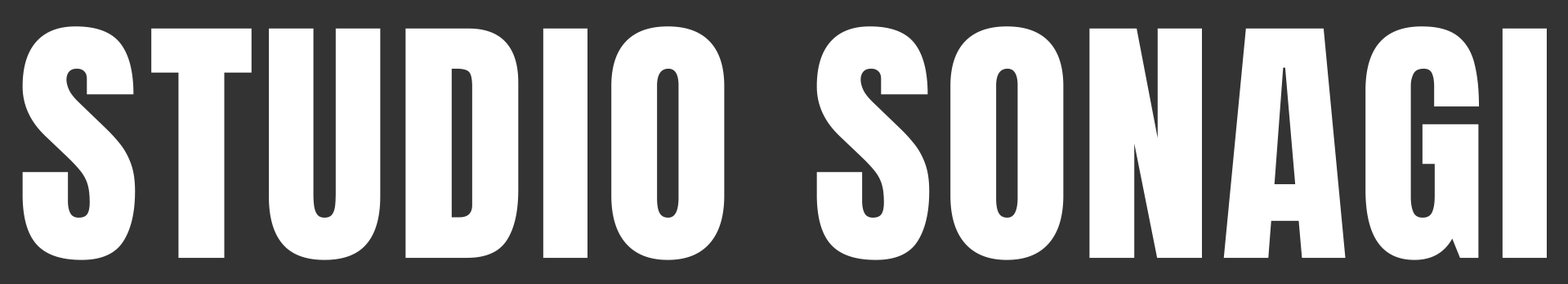
<style>
.page{position:relative;width:1568px;height:284px;background:#ffffff}
.page>*{position:absolute;margin:0}
.t1{font:266.2px "Anton-Regular";letter-spacing:0.03em;color:#ffffff}
</style>
<div class="page">
<p class="t1" style="left:22px;top:26px;width:1525px;height:234px">STUDIO SONAGI</p>
</div>
